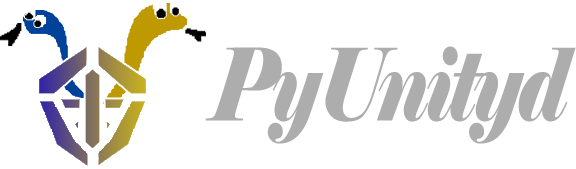
<style>
.page{position:relative;width:576px;height:169px;background:#ffffff}
.page>*{position:absolute;margin:0}
.t1{font:99.5px "Elephant-Italic";letter-spacing:-0.05em;color:#adadad;scale:0.77 1}
</style>
<div class="page">
<p class="t1" style="left:205px;top:46px;width:371px;height:98px">PyUnityd</p>
</div>
